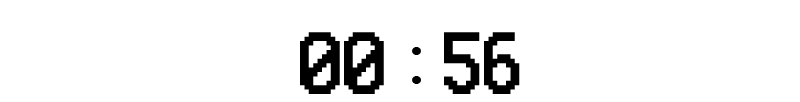
<style>
.page{position:relative;width:800px;height:102px;background:#ffffff}
.page>*{position:absolute;margin:0}
.t1{font:75px "EASVHS";color:#000000}
.t2{font:75px "Century";color:#000000}
</style>
<div class="page">
<p class="t1" style="left:300px;top:32px;width:220px;height:62px">00 <span class="t2">:</span> 56</p>
</div>
